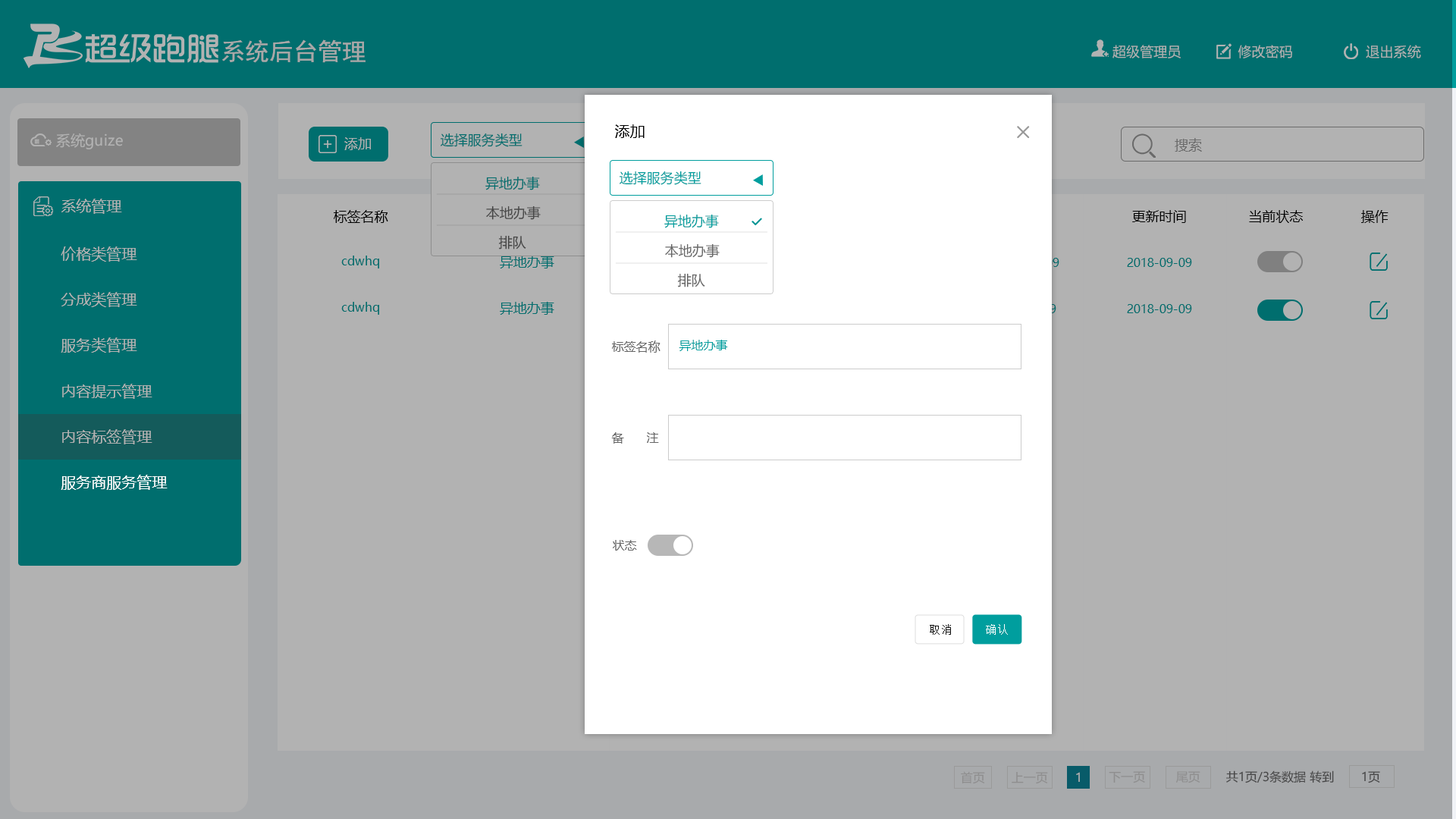
<style>
.page{position:relative;width:1456px;height:819px;background:#b2b2b2}
.page>*{position:absolute;margin:0}
.t1{font:24.4px "SimHei";color:#a8a8a8}
.t2{font:13.7px "MicrosoftYaHei";color:#b2b2b2}
.t3{font:15.2px "MicrosoftYaHei";color:#000000}
.t4{font:14.5px "MicrosoftYaHei";color:#b2b2b2}
.t5{font:13.6px "MicrosoftYaHei";color:#b2b2b2}
.t6{font:13.6px "MicrosoftYaHei";color:#006e6e}
.t7{font:13.6px "MicrosoftYaHei";color:#6b6b6b}
.t8{font:13.6px "MicrosoftYaHei";color:#009e9e}
.t9{font:15.2px "MicrosoftYaHei";color:#b2b2b2}
.t10{font:13.6px "MicrosoftYaHei";color:#474747}
.t11{font:13.6px "MicrosoftYaHei";color:#000000}
.t12{font:13.6px "MicrosoftYaHei";color:#666666}
.t13{font:12.1px "MicrosoftYaHei";color:#006e6e}
.t14{font:12.1px "MicrosoftYaHei";color:#666666}
.t15{font:12.1px "MicrosoftYaHei";color:#009e9e}
.t16{font:15.2px "MicrosoftYaHei";color:#ffffff}
.t17{font:11.5px "SimSun";letter-spacing:0.075em;color:#111111}
.t18{font:11.5px "SimSun";letter-spacing:0.075em;color:#ffffff}
.t19{font:12.1px "MicrosoftYaHei";color:#8e8e8e}
.t20{font:12.1px "MicrosoftYaHei";color:#b2b2b2}
.t21{font:12.1px "MicrosoftYaHei";color:#464646}
</style>
<div class="page">
<p class="t1" style="left:222px;top:39px;width:144px;height:24px">系统后台管理</p>
<p class="t2" style="left:1112px;top:45px;width:309px;height:13px">超级管理员              修改密码                  退出系统</p>
<p class="t3" style="left:615px;top:124px;width:30px;height:14px">添加</p>
<p class="t4" style="left:56px;top:133px;width:67px;height:16px">系统guize</p>
<p class="t5" style="left:344px;top:137px;width:27px;height:13px">添加</p>
<p class="t6" style="left:441px;top:133px;width:81px;height:14px">选择服务类型</p>
<p class="t7" style="left:1175px;top:138px;width:27px;height:14px">搜索</p>
<p class="t8" style="left:620px;top:171px;width:81px;height:14px">选择服务类型</p>
<p class="t6" style="left:485px;top:176px;width:55px;height:14px">异地办事</p>
<p class="t9" style="left:61px;top:199px;width:61px;height:15px">系统管理</p>
<p class="t10" style="left:486px;top:206px;width:55px;height:14px">本地办事</p>
<p class="t11" style="left:334px;top:210px;width:54px;height:13px">标签名称</p>
<p class="t8" style="left:664px;top:214px;width:55px;height:14px">异地办事</p>
<p class="t11" style="left:1132px;top:210px;width:54px;height:13px">更新时间</p>
<p class="t11" style="left:1249px;top:210px;width:54px;height:13px">当前状态</p>
<p class="t11" style="left:1361px;top:210px;width:27px;height:13px">操作</p>
<p class="t10" style="left:499px;top:235px;width:27px;height:14px">排队</p>
<p class="t12" style="left:665px;top:243px;width:55px;height:15px">本地办事</p>
<p class="t9" style="left:61px;top:246px;width:76px;height:16px">价格类管理</p>
<p class="t13" style="left:341px;top:256px;width:38px;height:12px">cdwhq</p>
<p class="t6" style="left:500px;top:256px;width:54px;height:12px">异地办事</p>
<p class="t13" style="left:1127px;top:258px;width:65px;height:9px">2018-09-09</p>
<p class="t12" style="left:678px;top:273px;width:27px;height:14px">排队</p>
<p class="t9" style="left:61px;top:292px;width:76px;height:15px">分成类管理</p>
<p class="t13" style="left:341px;top:302px;width:38px;height:13px">cdwhq</p>
<p class="t6" style="left:500px;top:302px;width:54px;height:13px">异地办事</p>
<p class="t13" style="left:1127px;top:304px;width:65px;height:9px">2018-09-09</p>
<p class="t9" style="left:61px;top:337px;width:76px;height:16px">服务类管理</p>
<p class="t14" style="left:612px;top:340px;width:48px;height:13px">标签名称</p>
<p class="t15" style="left:679px;top:340px;width:49px;height:11px">异地办事</p>
<p class="t9" style="left:62px;top:384px;width:90px;height:15px">内容提示管理</p>
<p class="t9" style="left:62px;top:429px;width:90px;height:15px">内容标签管理</p>
<p class="t14" style="left:611px;top:432px;width:48px;height:12px">备      注</p>
<p class="t16" style="left:61px;top:475px;width:107px;height:15px">服务商服务管理</p>
<p class="t14" style="left:613px;top:540px;width:24px;height:11px">状态</p>
<p class="t17" style="left:930px;top:624px;width:21px;height:11px">取消</p>
<p class="t18" style="left:986px;top:624px;width:22px;height:11px">确认</p>
<p class="t19" style="left:961px;top:771px;width:24px;height:13px">首页</p>
<p class="t19" style="left:1012px;top:772px;width:36px;height:12px">上一页</p>
<p class="t20" style="left:1076px;top:772px;width:4px;height:10px">1</p>
<p class="t19" style="left:1109px;top:771px;width:36px;height:12px">下一页</p>
<p class="t19" style="left:1176px;top:771px;width:24px;height:12px">尾页</p>
<p class="t21" style="left:1226px;top:770px;width:108px;height:13px">共1页/3条数据 转到</p>
<p class="t21" style="left:1362px;top:771px;width:18px;height:12px">1页</p>
</div>
